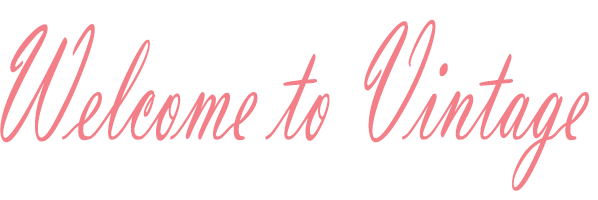
<style>
.page{position:relative;width:598px;height:200px;background:#ffffff}
.page>*{position:absolute;margin:0}
.t1{font:172px "VladimirScript";color:#f38088;scale:0.51 1}
</style>
<div class="page">
<p class="t1" style="left:0px;top:19px;width:589px;height:172px">Welcome to Vintage</p>
</div>
